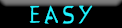
<style>
.page{position:relative;width:122px;height:28px;background:#000000}
.page>*{position:absolute;margin:0}
.t1{font:27.8px "RWBY_Style";letter-spacing:0.14em;color:#1ef2ff;scale:1.08 1}
</style>
<div class="page">
<p class="t1" style="left:29px;top:5px;width:64px;height:19px">easy</p>
</div>
